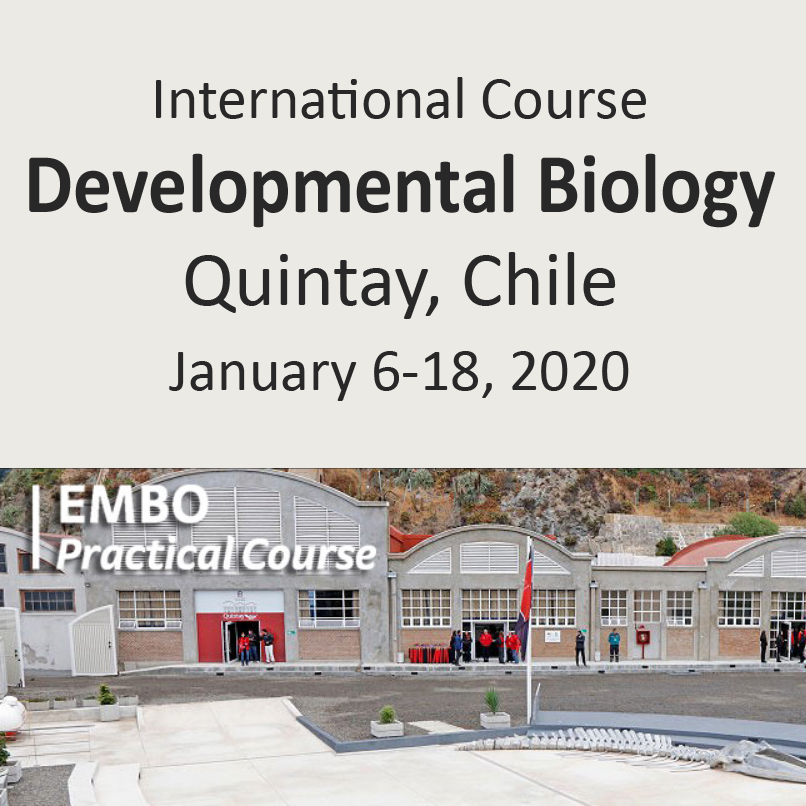
<style>
.page{position:relative;width:806px;height:806px;background:#ebeae5}
.page>*{position:absolute;margin:0}
.t1{font:85.8px "Calibri-Bold";color:#282828;scale:0.91 1}
.t2{font:60px "Calibri";color:#282828}
.t3{font:78px "Calibri";color:#282828}
.t4{font:60px/85px "Calibri";color:#282828}
</style>
<div class="page">
<p class="t1" style="left:29px;top:77px;width:746px;height:324px;text-align:center"><span class="t2">International Course<br></span>Developmental Biology<br><span class="t3">Quintay, Chile<br></span><span class="t4">January 6-18, 2020</span></p>
</div>
